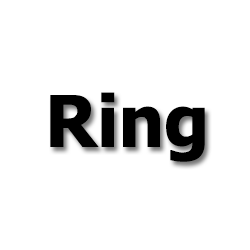
<style>
.page{position:relative;width:250px;height:250px;background:#ffffff}
.page>*{position:absolute;margin:0}
.t1{font:71.3px "Tahoma-Bold";color:#000000}
</style>
<div class="page">
<p class="t1" style="left:50px;top:92px;width:155px;height:70px">Ring</p>
</div>
